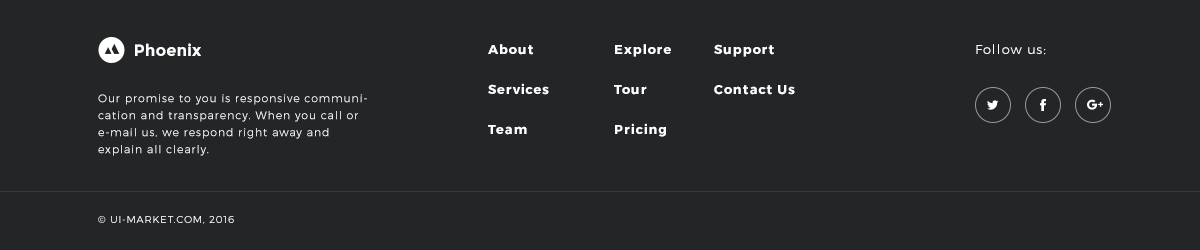
<style>
.page{position:relative;width:1200px;height:250px;background:#242526}
.page>*{position:absolute;margin:0}
.t1{font:16.4px "Montserrat-Bold";color:#ffffff}
.t2{font:13px/40px "Montserrat-Bold";letter-spacing:0.07em;color:#ffffff}
.t3{font:13px "Montserrat-Light";letter-spacing:0.07em;color:#ffffff}
.t4{font:11px/17px "Montserrat-Light";letter-spacing:0.08em;color:#ffffff}
.t5{font:10px "Montserrat-Light";letter-spacing:0.08em;color:#ffffff;text-transform:uppercase}
</style>
<div class="page">
<p class="t1" style="left:135px;top:43px;width:66px;height:13px">Phoenix</p>
<p class="t2" style="left:488px;top:44px;width:61px;height:91px">About<br>Services<br>Team</p>
<p class="t2" style="left:614px;top:44px;width:57px;height:93px">Explore<br>Tour<br>Pricing</p>
<p class="t2" style="left:714px;top:44px;width:81px;height:51px">Support<br>Contact Us</p>
<p class="t3" style="left:976px;top:44px;width:70px;height:11px">Follow us:</p>
<p class="t4" style="left:98px;top:94px;width:269px;height:62px">Our promise to you is responsive communication and transparency. When you call or e-mail us, we respond right away and explain all clearly.</p>
<p class="t5" style="left:98px;top:216px;width:136px;height:8px">© UI-market.com, 2016</p>
</div>
